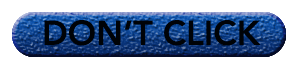
<style>
.page{position:relative;width:300px;height:70px;background:#ffffff}
.page>*{position:absolute;margin:0}
.t1{font:34px "AvenirLT-Heavy";color:#000307}
</style>
<div class="page">
<p class="t1" style="left:44px;top:20px;width:217px;height:26px">DON’T CLICK</p>
</div>
